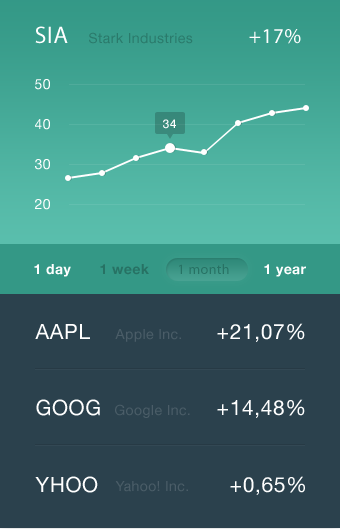
<style>
.page{position:relative;width:340px;height:529px;background:#2b414d}
.page>*{position:absolute;margin:0}
.t1{font:24px "MyriadPro-Regular";letter-spacing:0.03em;color:#ffffff}
.t2{font:21px "MyriadPro-Regular";letter-spacing:0.03em;color:#ffffff}
.t3{font:14px "HelveticaNeue";letter-spacing:0.03em;color:#2a7a6b}
.t4{font:14px "HelveticaNeue";letter-spacing:0.03em;color:#ffffff}
.t5{font:12px "HelveticaNeue-Medium";letter-spacing:0.03em;color:#ffffff}
.t6{font:14px "HelveticaNeue-Bold";letter-spacing:0.03em;color:#ffffff}
.t7{font:14px "HelveticaNeue-Bold";letter-spacing:0.03em;color:#277264}
.t8{font:14px "MyriadPro-Regular";letter-spacing:0.03em;color:#277264}
.t9{font:21px "HelveticaNeue";letter-spacing:0.03em;color:#ffffff}
.t10{font:14px "HelveticaNeue";letter-spacing:0.03em;color:#4b5d68}
</style>
<div class="page">
<p class="t1" style="left:35px;top:26px;width:33px;height:18px">SIA</p>
<p class="t2" style="left:249px;top:29px;width:52px;height:15px">+17%</p>
<p class="t3" style="left:89px;top:32px;width:104px;height:12px">Stark Industries</p>
<p class="t4" style="left:35px;top:79px;width:15px;height:11px">50</p>
<p class="t4" style="left:35px;top:119px;width:15px;height:11px">40</p>
<p class="t5" style="left:163px;top:119px;width:13px;height:10px">34</p>
<p class="t4" style="left:35px;top:159px;width:15px;height:11px">30</p>
<p class="t4" style="left:35px;top:199px;width:15px;height:11px">20</p>
<p class="t6" style="left:34px;top:264px;width:37px;height:13px">1 day</p>
<p class="t7" style="left:100px;top:264px;width:49px;height:11px">1 week</p>
<p class="t8" style="left:179px;top:264px;width:50px;height:10px">1 month</p>
<p class="t6" style="left:264px;top:264px;width:42px;height:13px">1 year</p>
<p class="t9" style="left:35px;top:324px;width:55px;height:15px">AAPL</p>
<p class="t10" style="left:115px;top:329px;width:66px;height:13px">Apple Inc.</p>
<p class="t9" style="left:217px;top:323px;width:88px;height:19px">+21,07%</p>
<p class="t9" style="left:36px;top:399px;width:64px;height:17px">GOOG</p>
<p class="t9" style="left:217px;top:399px;width:88px;height:19px">+14,48%</p>
<p class="t10" style="left:115px;top:404px;width:75px;height:14px">Google Inc.</p>
<p class="t9" style="left:35px;top:476px;width:63px;height:17px">YHOO</p>
<p class="t10" style="left:115px;top:481px;width:73px;height:11px">Yahoo! Inc.</p>
<p class="t9" style="left:230px;top:476px;width:75px;height:19px">+0,65%</p>
</div>
